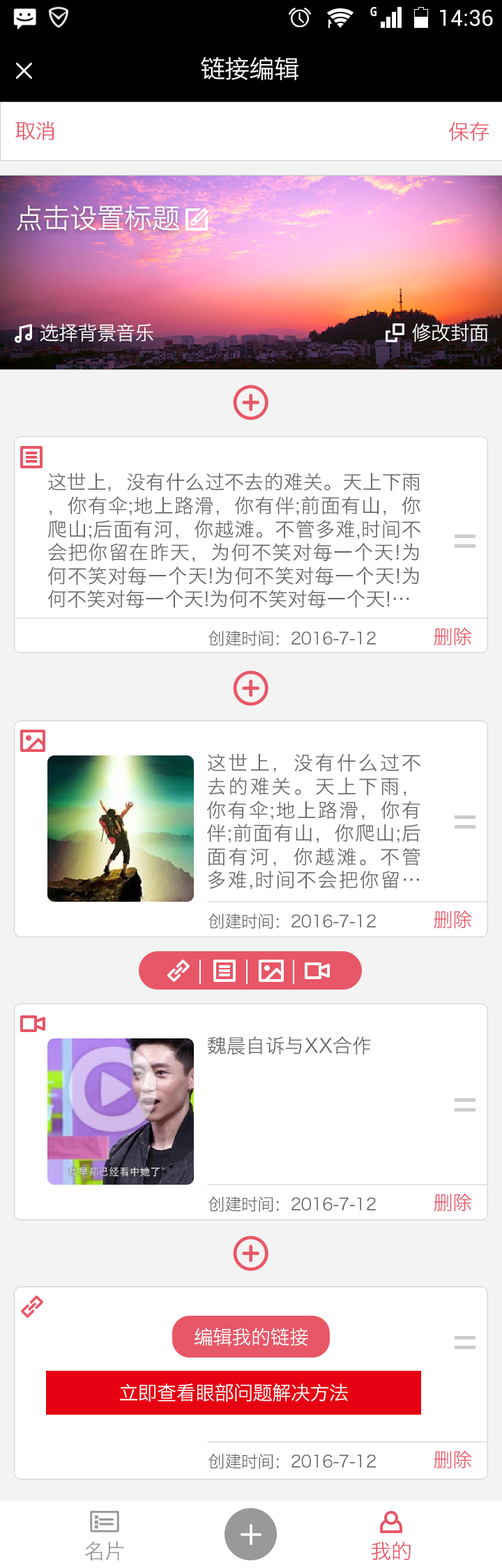
<style>
.page{position:relative;width:502px;height:1568px;background:#ffffff}
.page>*{position:absolute;margin:0}
.t1{font:25.1px "HiraginoSansGB-W3";letter-spacing:-0.02em;color:#ffffff}
.t2{font:20.9px "HiraginoSansGB-W3";letter-spacing:-0.02em;color:#e85767}
.t3{font:27.9px "HiraginoSansGB-W3";letter-spacing:-0.02em;color:#ffffff}
.t4{font:19.5px "HiraginoSansGB-W3";letter-spacing:-0.02em;color:#ffffff}
.t5{font:19.5px "HiraginoSansGB-W3";color:#666666}
.t6{font:16.7px "HiraginoSansGB-W3";letter-spacing:-0.02em;color:#666666}
.t7{font:19.5px "HiraginoSansGB-W3";letter-spacing:-0.02em;color:#e85767}
.t8{font:20.9px "HiraginoSansGB-W3";letter-spacing:-0.02em;color:#999999}
</style>
<div class="page">
<p class="t1" style="left:201px;top:56px;width:97px;height:24px">链接编辑</p>
<p class="t2" style="left:15px;top:121px;width:39px;height:20px">取消</p>
<p class="t2" style="left:448px;top:121px;width:41px;height:20px">保存</p>
<p class="t3" style="left:17px;top:205px;width:163px;height:26px">点击设置标题</p>
<p class="t4" style="left:40px;top:323px;width:113px;height:19px">选择背景音乐</p>
<p class="t4" style="left:412px;top:323px;width:76px;height:19px">修改封面</p>
<p class="t5" style="left:47px;top:472px;width:373px;height:136px;text-align:justify">这世上，没有什么过不去的难关。天上下雨，你有伞;地上路滑，你有伴;前面有山，你爬山;后面有河，你越滩。不管多难,时间不会把你留在昨天，为何不笑对每一个天!为何不笑对每一个天!为何不笑对每一个天!为何不笑对每一个天!为何不笑对每一个天!…</p>
<p class="t6" style="left:208px;top:630px;width:168px;height:16px">创建时间：2016-7-12</p>
<p class="t7" style="left:433px;top:627px;width:39px;height:18px">删除</p>
<p class="t5" style="left:207px;top:753px;width:213px;height:137px;text-align:justify">这世上，没有什么过不去的难关。天上下雨，你有伞;地上路滑，你有伴;前面有山，你爬山;后面有河，你越滩。不管多难,时间不会把你留……在昨天，为何不笑对每一个……天!</p>
<p class="t6" style="left:208px;top:913px;width:168px;height:16px">创建时间：2016-7-12</p>
<p class="t7" style="left:433px;top:910px;width:39px;height:18px">删除</p>
<p class="t5" style="left:207px;top:1036px;width:164px;height:19px">魏晨自诉与XX合作</p>
<p class="t7" style="left:433px;top:1193px;width:39px;height:18px">删除</p>
<p class="t6" style="left:208px;top:1196px;width:168px;height:16px">创建时间：2016-7-12</p>
<p class="t4" style="left:194px;top:1328px;width:114px;height:18px">编辑我的链接</p>
<p class="t4" style="left:120px;top:1383px;width:228px;height:19px">立即查看眼部问题解决方法</p>
<p class="t6" style="left:208px;top:1453px;width:168px;height:16px">创建时间：2016-7-12</p>
<p class="t7" style="left:433px;top:1450px;width:39px;height:18px">删除</p>
<p class="t8" style="left:85px;top:1541px;width:39px;height:20px">名片</p>
<p class="t2" style="left:371px;top:1542px;width:39px;height:18px">我的</p>
</div>
